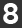
<style>
.page{position:relative;width:22px;height:28px;background:#333333}
.page>*{position:absolute;margin:0}
.t1{font:30px "ProductSans-Bold";color:#ffffff}
</style>
<div class="page">
<p class="t1" style="left:3px;top:3px;width:16px;height:21px">8</p>
</div>
